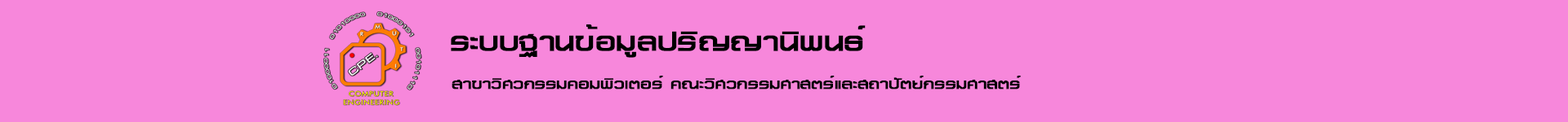
<style>
.page{position:relative;width:1568px;height:122px;background:#f787db}
.page>*{position:absolute;margin:0}
.t1{font:37.4px "PSLNatrinthornExtra";color:#000000;font-weight:bold}
.t2{font:39.4px "PSLNatrinthornExtra";color:#000000;font-weight:bold}
.t3{font:20.4px "PSLNatrinthornExtra";color:#000000;font-weight:bold}
</style>
<div class="page">
<p class="t1" style="left:451px;top:24px;width:415px;height:34px">ระบบฐานข้อมูลปริญญานิพนธ<span class="t2">์</span></p>
<p class="t3" style="left:452px;top:76px;width:569px;height:14px">สาขาวิศวกรรมคอมพิวเตอร์ คณะวิศวกรรมศาสตร์และสถาปัตย์กรรมศาสตร์</p>
</div>
